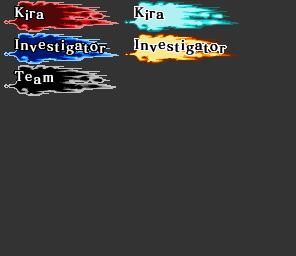
<style>
.page{position:relative;width:296px;height:256px;background:#333333}
.page>*{position:absolute;margin:0}
.t1{font:13px/32px "MatisseVPro-DB";letter-spacing:0.1em;color:#ffffff}
.t2{font:13px/32px "MatisseVPro-DB";color:#ffffff}
.t3{font:13px "MatisseVPro-DB";letter-spacing:0.1em;color:#000000}
.t4{font:13px "MatisseVPro-DB";color:#000000}
.t5{font:13px "MatisseVPro-DB";letter-spacing:0.1em;color:#ffffff}
</style>
<div class="page">
<p class="t1" style="left:14px;top:7px;width:40px;height:77px">K<span class="t2">i</span>ra<br><br>Team</p>
<p class="t3" style="left:134px;top:7px;width:30px;height:13px">K<span class="t4">i</span>ra</p>
<p class="t5" style="left:14px;top:39px;width:92px;height:16px">Investigator</p>
<p class="t3" style="left:134px;top:39px;width:92px;height:16px">Investigator</p>
</div>
